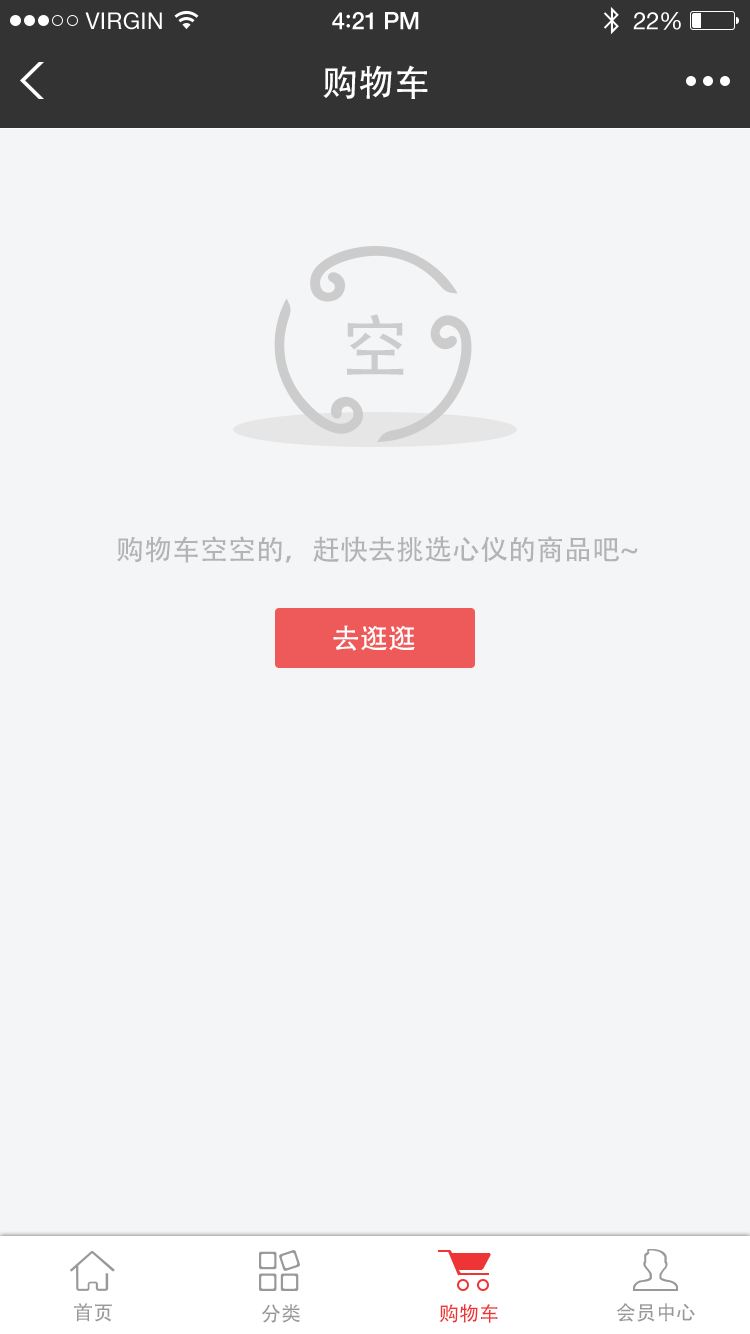
<style>
.page{position:relative;width:750px;height:1334px;background:#f3f5f7}
.page>*{position:absolute;margin:0}
.t1{font:36px "AdobeHeitiStd-Regular";color:#ffffff}
.t2{font:68px "AdobeHeitiStd-Regular";color:#cccccc}
.t3{font:28px "AdobeHeitiStd-Regular";color:#b3b3b3}
.t4{font:28px "AdobeHeitiStd-Regular";color:#ffffff}
.t5{font:20px "AdobeHeitiStd-Regular";color:#999999}
.t6{font:20px "AdobeHeitiStd-Regular";color:#ee3434}
</style>
<div class="page">
<p class="t1" style="left:323px;top:65px;width:105px;height:34px">购物车</p>
<p class="t2" style="left:347px;top:314px;width:57px;height:61px">空</p>
<p class="t3" style="left:117px;top:536px;width:521px;height:27px">购物车空空的，赶快去挑选心仪的商品吧~</p>
<p class="t4" style="left:333px;top:625px;width:82px;height:26px">去逛逛</p>
<p class="t5" style="left:74px;top:1303px;width:38px;height:19px">首页</p>
<p class="t5" style="left:262px;top:1304px;width:38px;height:19px">分类</p>
<p class="t6" style="left:439px;top:1304px;width:59px;height:19px">购物车</p>
<p class="t5" style="left:616px;top:1303px;width:79px;height:19px">会员中心</p>
</div>
